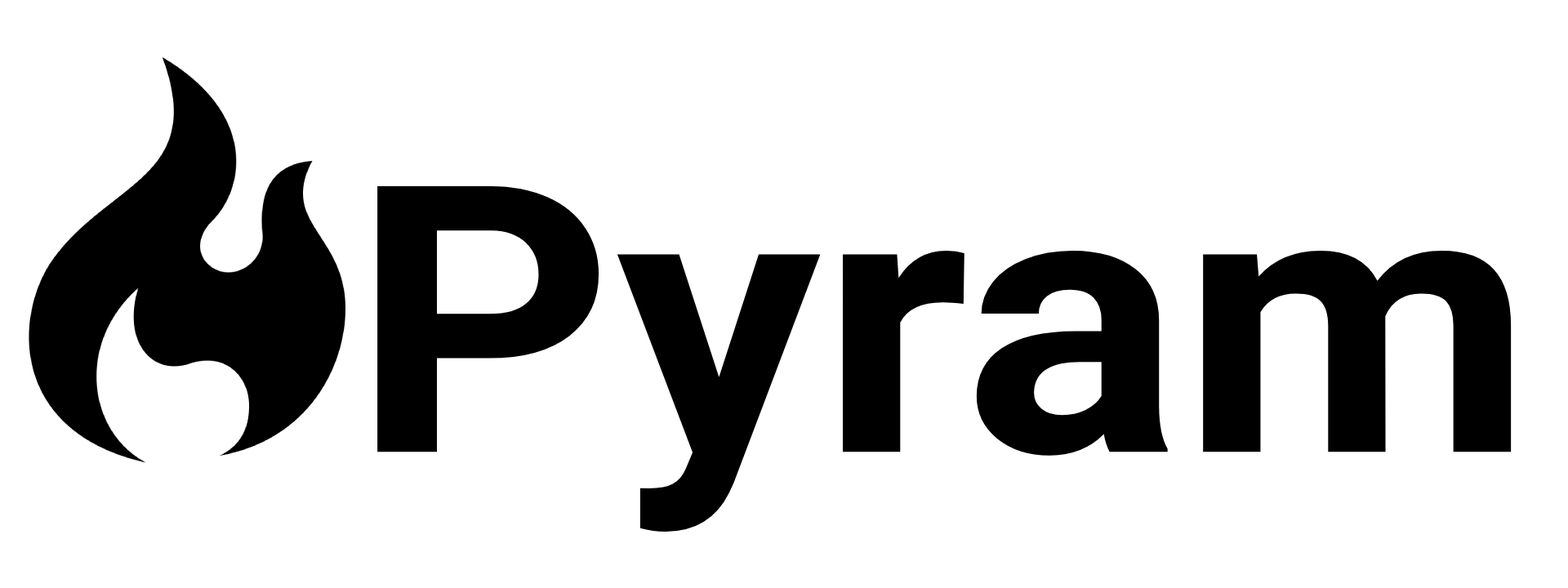
<style>
.page{position:relative;width:1568px;height:588px;background:#ffffff}
.page>*{position:absolute;margin:0}
.t1{font:373.8px "Roboto-Bold";color:#000000;scale:1.09 1}
</style>
<div class="page">
<p class="t1" style="left:377px;top:186px;width:1135px;height:346px">Pyram</p>
</div>
